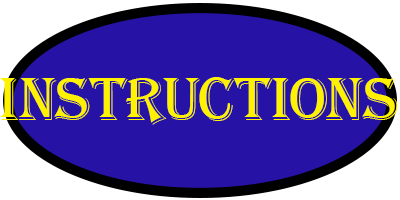
<style>
.page{position:relative;width:400px;height:200px;background:#2612a5}
.page>*{position:absolute;margin:0}
.t1{font:62.5px "Algerian";color:#fff200}
</style>
<div class="page">
<p class="t1" style="left:0px;top:77px;width:398px;height:48px">Instructions</p>
</div>
